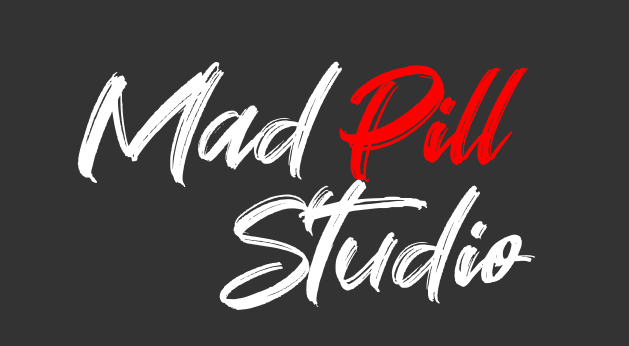
<style>
.page{position:relative;width:629px;height:346px;background:#333333}
.page>*{position:absolute;margin:0}
.t1{font:150px "Great-Sejagad";color:#ffffff}
.t2{font:150px "Great-Sejagad";color:#ff0000}
</style>
<div class="page">
<p class="t1" style="left:77px;top:61px;width:265px;height:127px">Mad</p>
<p class="t2" style="left:339px;top:65px;width:189px;height:117px">Pill</p>
<p class="t1" style="left:219px;top:179px;width:317px;height:131px">Studio</p>
</div>
